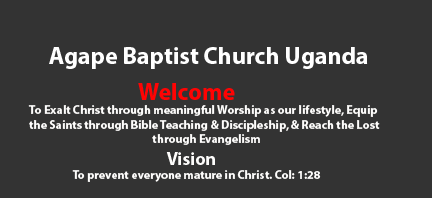
<style>
.page{position:relative;width:432px;height:198px;background:#333333}
.page>*{position:absolute;margin:0}
.t1{font:12px "MyriadPro-Bold";color:#fefdfc}
.t2{font:24px "MyriadPro-Bold";color:#b33b06}
.t3{font:24px "MyriadPro-Bold";color:#ffffff}
.t4{font:24px "MyriadPro-Bold";color:#ff0303}
.t5{font:18px "MyriadPro-Bold";color:#fefdfc}
</style>
<div class="page">
<p class="t1" style="left:28px;top:47px;width:352px;height:135px"><span class="t2">    </span><span class="t3">Agape Baptist Church Uganda<br>                  </span><span class="t4">Welcome<br></span>To Exalt Christ through meaningful Worship as our lifestyle, Equip <br>the Saints through Bible Teaching &amp; Discipleship, &amp; Reach the Lost <br>                                                   through Evangelism<br><span class="t5">                                      Vision<br></span>                  To prevent everyone mature in Christ. Col: 1:28</p>
</div>
